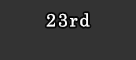
<style>
.page{position:relative;width:136px;height:60px;background:#333333}
.page>*{position:absolute;margin:0}
.t1{font:18px "Century";letter-spacing:0.1em;color:#ffffff}
</style>
<div class="page">
<p class="t1" style="left:46px;top:13px;width:44px;height:14px">23rd</p>
</div>
